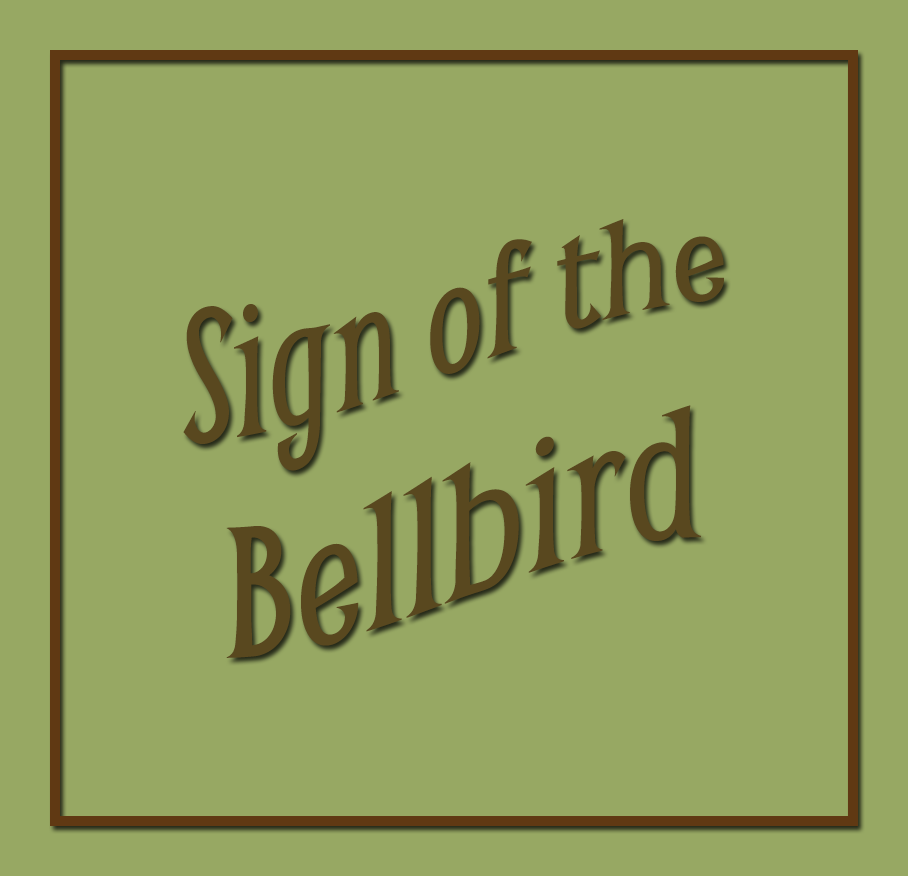
<style>
.page{position:relative;width:908px;height:876px;background:#97a863}
.page>*{position:absolute;margin:0}
.t1{font:170px "Smythe";color:#59481f}
.t2{font:200px "Smythe";color:#59481f}
</style>
<div class="page">
<p class="t1" style="left:183px;top:219px;width:541px;height:252px">Sign of the</p>
<p class="t2" style="left:226px;top:405px;width:475px;height:253px">Bellbird</p>
</div>
